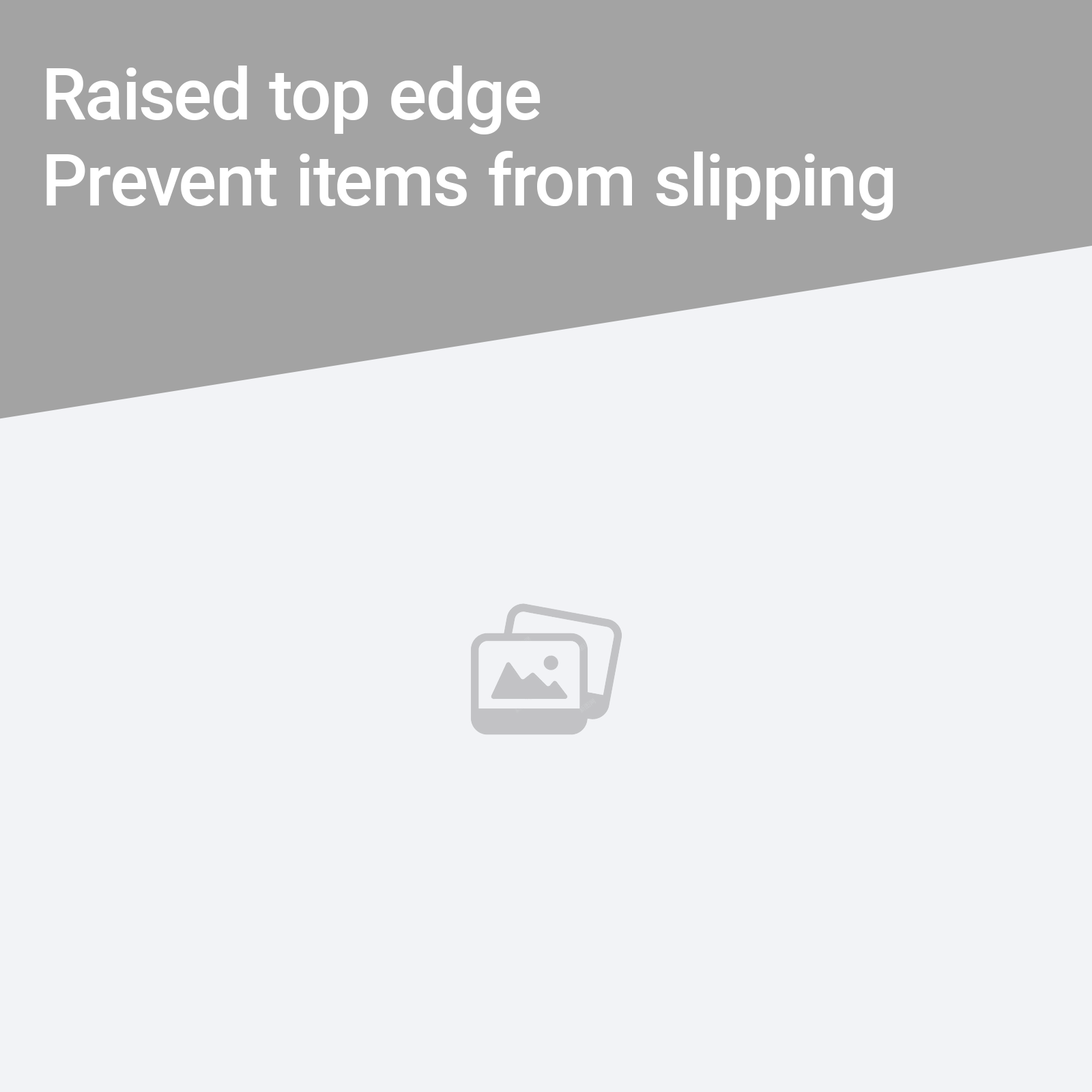
<style>
.page{position:relative;width:1092px;height:1092px;background:#f2f3f6}
.page>*{position:absolute;margin:0}
.t1{font:71.3px "Roboto-Medium";color:#ffffff}
</style>
<div class="page">
<p class="t1" style="left:46px;top:66px;width:847px;height:154px">Raised top edge<br>Prevent items from slipping</p>
</div>
